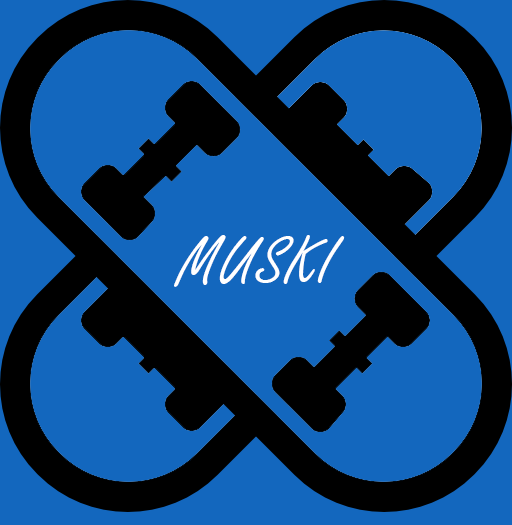
<style>
.page{position:relative;width:512px;height:525px;background:#1367be}
.page>*{position:absolute;margin:0}
.t1{font:72px "FreestyleScript-Regular";color:#ffffff}
</style>
<div class="page">
<p class="t1" style="left:174px;top:235px;width:171px;height:52px">MUSKI</p>
</div>
